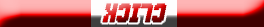
<style>
.page{position:relative;width:264px;height:27px}
.page>*{position:absolute;margin:0}
.t1{font:20.8px "Abduction2000"}
</style>
<div class="page">
<p class="t1" style="left:102px;top:3px;width:65px;height:20px;rotate:180deg">click</p>
</div>
